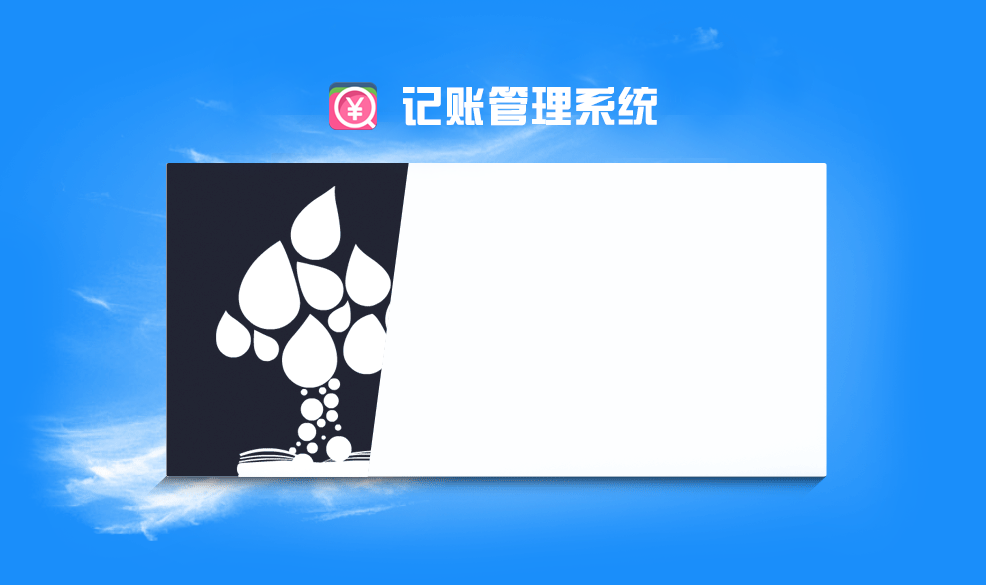
<style>
.page{position:relative;width:986px;height:585px;background:#fdfeff}
.page>*{position:absolute;margin:0}
.t1{font:42px "FZZYJW--GB1-0";color:#ffffff;font-weight:bold}
</style>
<div class="page">
<p class="t1" style="left:403px;top:86px;width:254px;height:40px">记账管理系统</p>
</div>
